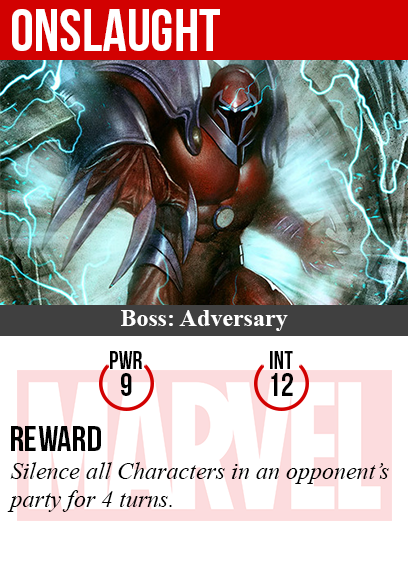
<style>
.page{position:relative;width:408px;height:585px;background:#ffffff}
.page>*{position:absolute;margin:0}
.t1{font:60px "BebasNeue";color:#ffffff}
.t2{font:24px "TimesNewRomanPS-BoldMT";color:#ffffff}
.t3{font:25px "BebasNeue";color:#000000}
.t4{font:32px "BebasNeue";color:#000000}
.t5{font:36px "BebasNeue";color:#000000}
.t6{font:24px "TimesNewRomanPS-ItalicMT";color:#000000}
</style>
<div class="page">
<p class="t1" style="left:12px;top:9px;width:208px;height:42px">onslaught</p>
<p class="t2" style="left:121px;top:310px;width:167px;height:21px">Boss: Adversary</p>
<p class="t3" style="left:110px;top:351px;width:32px;height:18px">pwr</p>
<p class="t3" style="left:270px;top:351px;width:23px;height:18px">int</p>
<p class="t4" style="left:121px;top:373px;width:11px;height:23px">9</p>
<p class="t4" style="left:271px;top:373px;width:22px;height:23px">12</p>
<p class="t5" style="left:11px;top:426px;width:90px;height:25px">reward</p>
<p class="t6" style="left:7px;top:462px;width:382px;height:50px">Silence all Characters in an opponent’s<br>party for 4 turns.</p>
</div>
